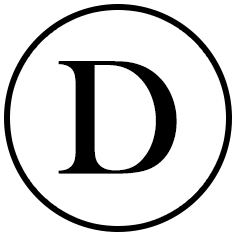
<style>
.page{position:relative;width:236px;height:236px;background:#ffffff}
.page>*{position:absolute;margin:0}
.t1{font:166.7px "BaskOldFace";color:#000000;font-weight:bold}
</style>
<div class="page">
<p class="t1" style="left:58px;top:61px;width:119px;height:113px">D</p>
</div>
